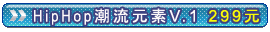
<style>
.page{position:relative;width:270px;height:32px;background:#ffffff}
.page>*{position:absolute;margin:0}
.t1{font:16px "ArialNarrow";letter-spacing:0.18em;color:#fdf9f9}
.t2{font:16px "MS-PGothic";letter-spacing:0.18em;color:#fdf9f9}
.t3{font:16px "ArialMT";letter-spacing:0.18em;color:#fdf9f9}
.t4{font:16px "ArialUnicodeMS";letter-spacing:0.18em;color:#f9fc07}
.t5{font:16px "MS-PGothic";letter-spacing:0.18em;color:#f9fc07}
</style>
<div class="page">
<p class="t1" style="left:34px;top:8px;width:225px;height:17px">HipHop<span class="t2">潮流元素</span><span class="t3">V.1 </span><span class="t4">299</span><span class="t5">元</span></p>
</div>
